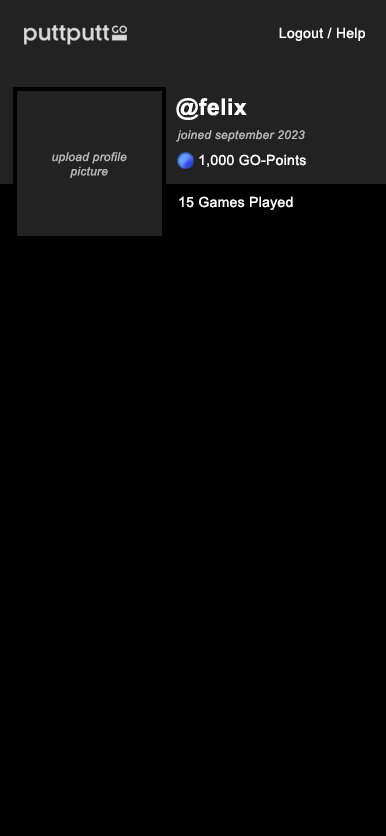
<style>
.page{position:relative;width:386px;height:836px;background:#000000}
.page>*{position:absolute;margin:0}
.t1{font:14px "ArialMT";letter-spacing:0.02em;color:#ffffff}
.t2{font:23px "Arial-BoldMT";letter-spacing:0.02em;color:#ffffff}
.t3{font:12px "Arial-ItalicMT";letter-spacing:0.02em;color:#b9b9b9}
</style>
<div class="page">
<p class="t1" style="left:279px;top:27px;width:86px;height:14px">Logout / Help</p>
<p class="t2" style="left:176px;top:98px;width:71px;height:22px">@felix</p>
<p class="t3" style="left:176px;top:130px;width:129px;height:12px">joined september 2023</p>
<p class="t3" style="left:52px;top:152px;width:75px;height:26px;text-align:center">upload profile<br>picture</p>
<p class="t1" style="left:199px;top:154px;width:107px;height:13px">1,000 GO-Points</p>
<p class="t1" style="left:179px;top:196px;width:114px;height:14px">15 Games Played</p>
</div>
